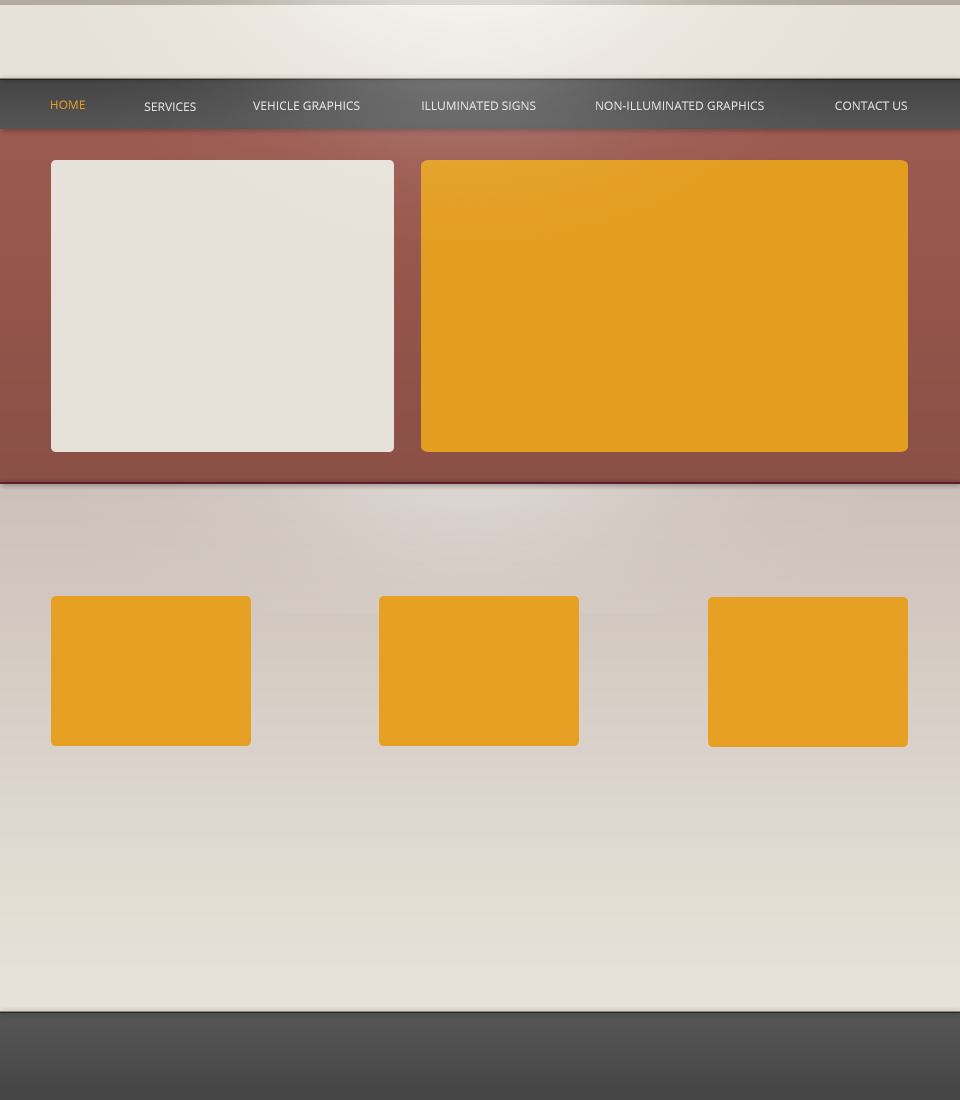
<style>
.page{position:relative;width:960px;height:1100px}
.page>*{position:absolute;margin:0}
.t1{font:12px "OpenSans";color:#e39d1f}
.t2{font:12px "OpenSans";color:#e2e2e2}
</style>
<div class="page">
<p class="t1" style="left:51px;top:100px;width:34px;height:9px">HOME</p>
<p class="t2" style="left:144px;top:102px;width:52px;height:9px">SERVICES</p>
<p class="t2" style="left:253px;top:101px;width:107px;height:9px">VEHICLE GRAPHICS</p>
<p class="t2" style="left:422px;top:101px;width:114px;height:9px">ILLUMINATED SIGNS</p>
<p class="t2" style="left:596px;top:101px;width:168px;height:9px">NON-ILLUMINATED GRAPHICS</p>
<p class="t2" style="left:835px;top:101px;width:72px;height:9px">CONTACT US</p>
</div>
